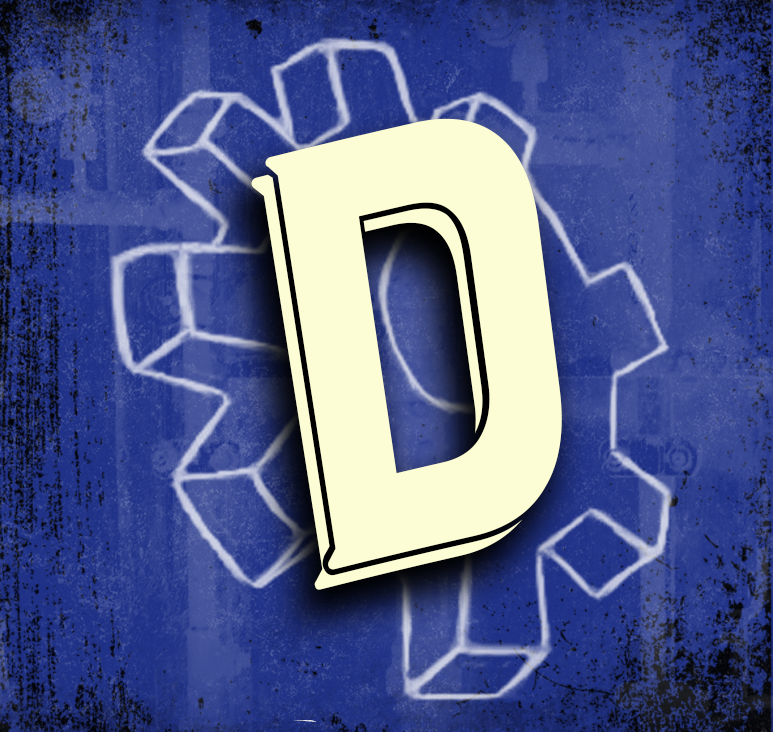
<style>
.page{position:relative;width:773px;height:732px}
.page>*{position:absolute;margin:0}
.t1{font:796.7px "Burford-DropShadow";color:#fdfdd5;scale:0.79 1}
</style>
<div class="page">
<p class="t1" style="left:251px;top:118px;width:311px;height:472px">D</p>
</div>
